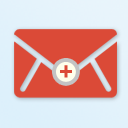
<style>
.page{position:relative;width:128px;height:128px;background:#db4a37}
.page>*{position:absolute;margin:0}
.t1{font:24.5px "NewsGothicStd-Bold";letter-spacing:0.065em;color:#db4a37}
</style>
<div class="page">
<p class="t1" style="left:60px;top:65px;width:12px;height:13px">+</p>
</div>
